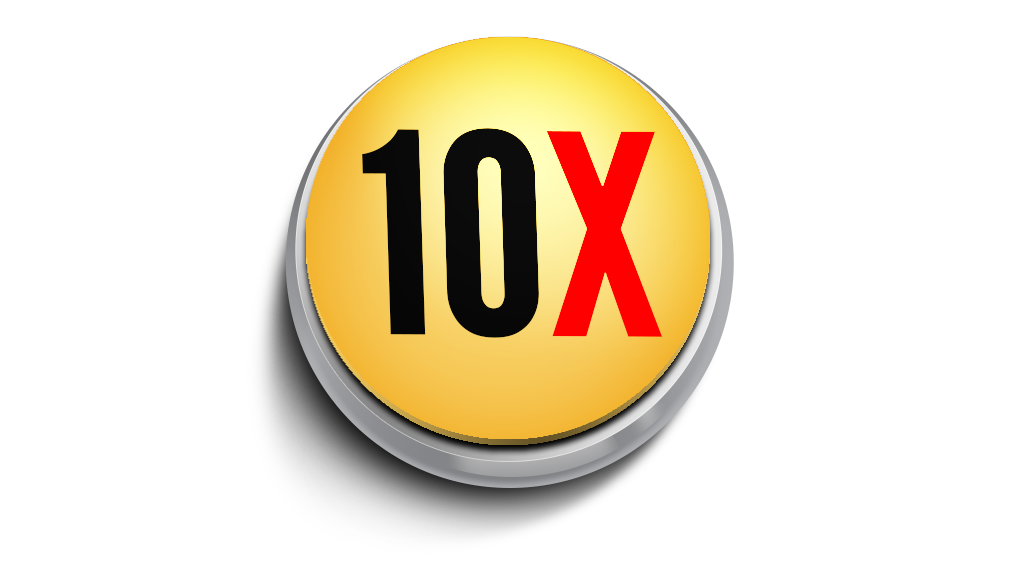
<style>
.page{position:relative;width:1028px;height:566px;background:#ffffff}
.page>*{position:absolute;margin:0}
.t1{font:279px "LeagueGothic-Regular";color:#060606;scale:1.14 1}
.t2{font:279px "LeagueGothic-Regular";color:#ff0000;scale:1.14 1}
</style>
<div class="page">
<p class="t1" style="left:362px;top:128px;width:301px;height:210px">10<span class="t2">X</span></p>
</div>
